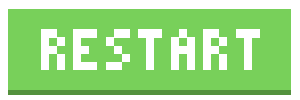
<style>
.page{position:relative;width:300px;height:100px;background:#78d05a}
.page>*{position:absolute;margin:0}
.t1{font:65px "Pixelated";color:#ffffff}
</style>
<div class="page">
<p class="t1" style="left:41px;top:29px;width:219px;height:41px">RESTART</p>
</div>
